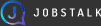
<style>
.page{position:relative;width:101px;height:26px;background:#333333}
.page>*{position:absolute;margin:0}
.t1{font:11px "Dosis-SemiBold";letter-spacing:0.28em;color:#ffffff;text-transform:uppercase}
</style>
<div class="page">
<p class="t1" style="left:33px;top:8px;width:69px;height:9px">JOBSTALK</p>
</div>
